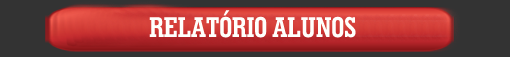
<style>
.page{position:relative;width:510px;height:57px;background:#333333}
.page>*{position:absolute;margin:0}
.t1{font:28.7px "GeometricSlab703BT-BoldCond";color:#fffffc;scale:0.97 1}
</style>
<div class="page">
<p class="t1" style="left:149px;top:10px;width:207px;height:28px">RELATÓRIO ALUNOS</p>
</div>
